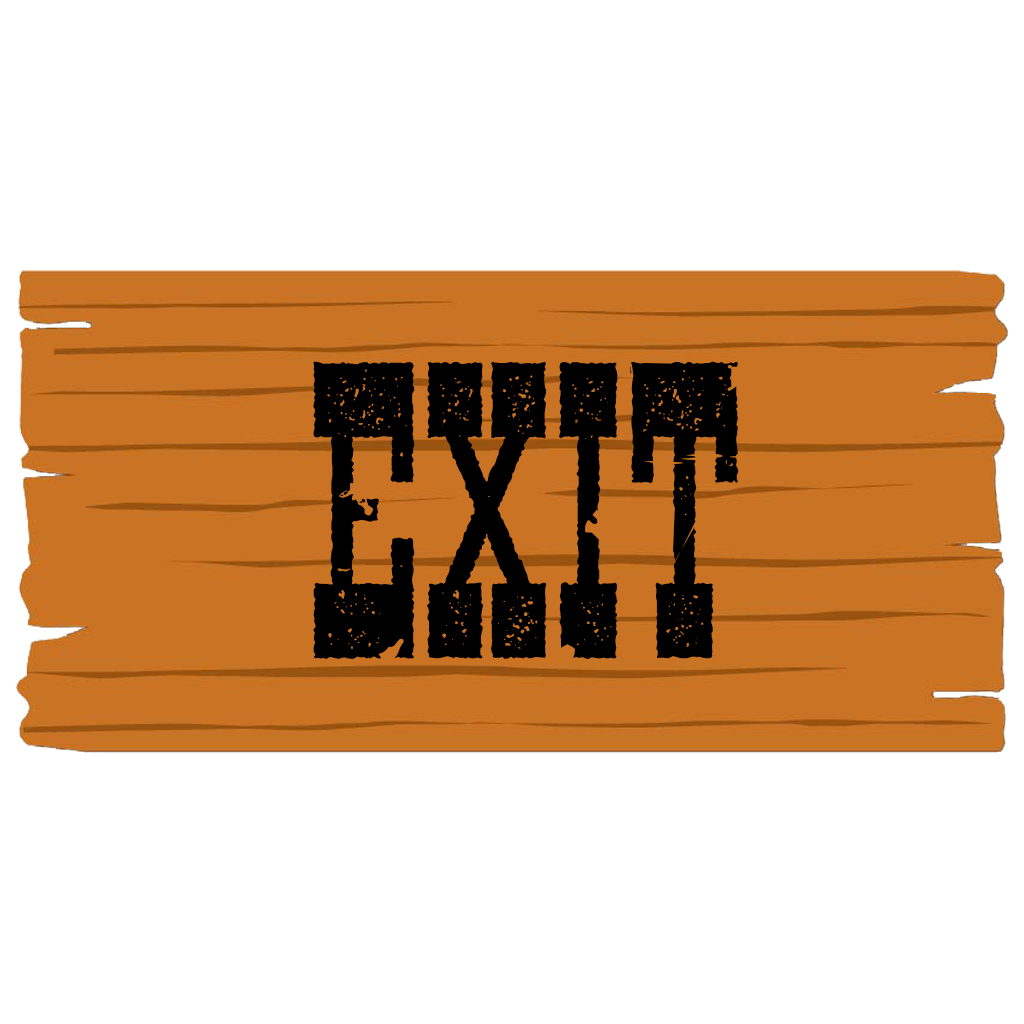
<style>
.page{position:relative;width:1024px;height:1024px;background:#ffffff}
.page>*{position:absolute;margin:0}
.t1{font:256px "DurangoWesternEroded";color:#000000}
</style>
<div class="page">
<p class="t1" style="left:313px;top:361px;width:426px;height:298px">EXIT</p>
</div>
